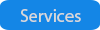
<style>
.page{position:relative;width:100px;height:30px;background:#1486e6}
.page>*{position:absolute;margin:0}
.t1{font:18px "MyriadPro-Regular";color:#d7d9d8}
</style>
<div class="page">
<p class="t1" style="left:20px;top:9px;width:61px;height:13px">Services</p>
</div>
